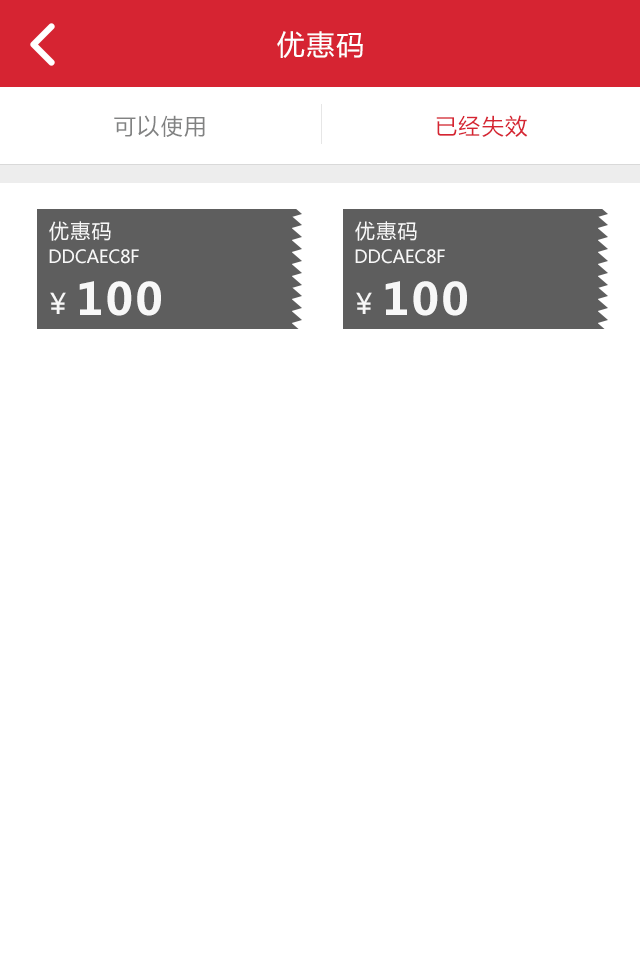
<style>
.page{position:relative;width:640px;height:960px;background:#ffffff}
.page>*{position:absolute;margin:0}
.t1{font:28px "MicrosoftYaHei";letter-spacing:0.06em;color:#ffffff}
.t2{font:22px "MicrosoftYaHei";letter-spacing:0.06em;color:#818282}
.t3{font:22px "MicrosoftYaHei";letter-spacing:0.06em;color:#d62432}
.t4{font:20px "MicrosoftYaHei";letter-spacing:0.06em;color:#f7f7f7}
.t5{font:18px "MicrosoftYaHei";letter-spacing:-0.02em;color:#f7f7f7}
.t6{font:44px "MicrosoftYaHei-Bold";letter-spacing:0.06em;color:#f7f7f7}
.t7{font:28px "MicrosoftYaHei";letter-spacing:0.06em;color:#f7f7f7}
</style>
<div class="page">
<p class="t1" style="left:277px;top:31px;width:86px;height:27px">优惠码</p>
<p class="t2" style="left:114px;top:115px;width:91px;height:22px">可以使用</p>
<p class="t3" style="left:436px;top:115px;width:92px;height:22px">已经失效</p>
<p class="t4" style="left:49px;top:221px;width:62px;height:20px">优惠码</p>
<p class="t4" style="left:355px;top:221px;width:62px;height:20px">优惠码</p>
<p class="t5" style="left:49px;top:249px;width:90px;height:15px">DDCAEC8F</p>
<p class="t5" style="left:355px;top:249px;width:90px;height:15px">DDCAEC8F</p>
<p class="t6" style="left:79px;top:281px;width:82px;height:35px">100</p>
<p class="t6" style="left:385px;top:281px;width:82px;height:35px">100</p>
<p class="t7" style="left:50px;top:292px;width:16px;height:22px">￥</p>
<p class="t7" style="left:356px;top:292px;width:16px;height:22px">￥</p>
</div>
